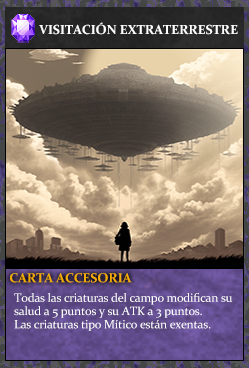
<style>
.page{position:relative;width:249px;height:368px}
.page>*{position:absolute;margin:0}
.t1{font:13.3px "Constantia-Bold";letter-spacing:-0.02em;color:#ffffff}
.t2{font:13.3px "Constantia-Bold";letter-spacing:-0.02em;color:#f2ac05}
.t3{font:12px/13.3px "Constantia";letter-spacing:-0.02em;color:#ffffff}
</style>
<div class="page">
<p class="t1" style="left:39px;top:22px;width:199px;height:13px">VISITACIÓN EXTRATERRESTRE</p>
<p class="t2" style="left:10px;top:273px;width:122px;height:10px">CARTA ACCESORIA</p>
<p class="t3" style="left:14px;top:293px;width:219px;height:38px">Todas las criaturas del campo modifican su<br>salud a 5 puntos y su ATK a 3 puntos.<br>Las criaturas tipo Mítico están exentas.</p>
</div>
